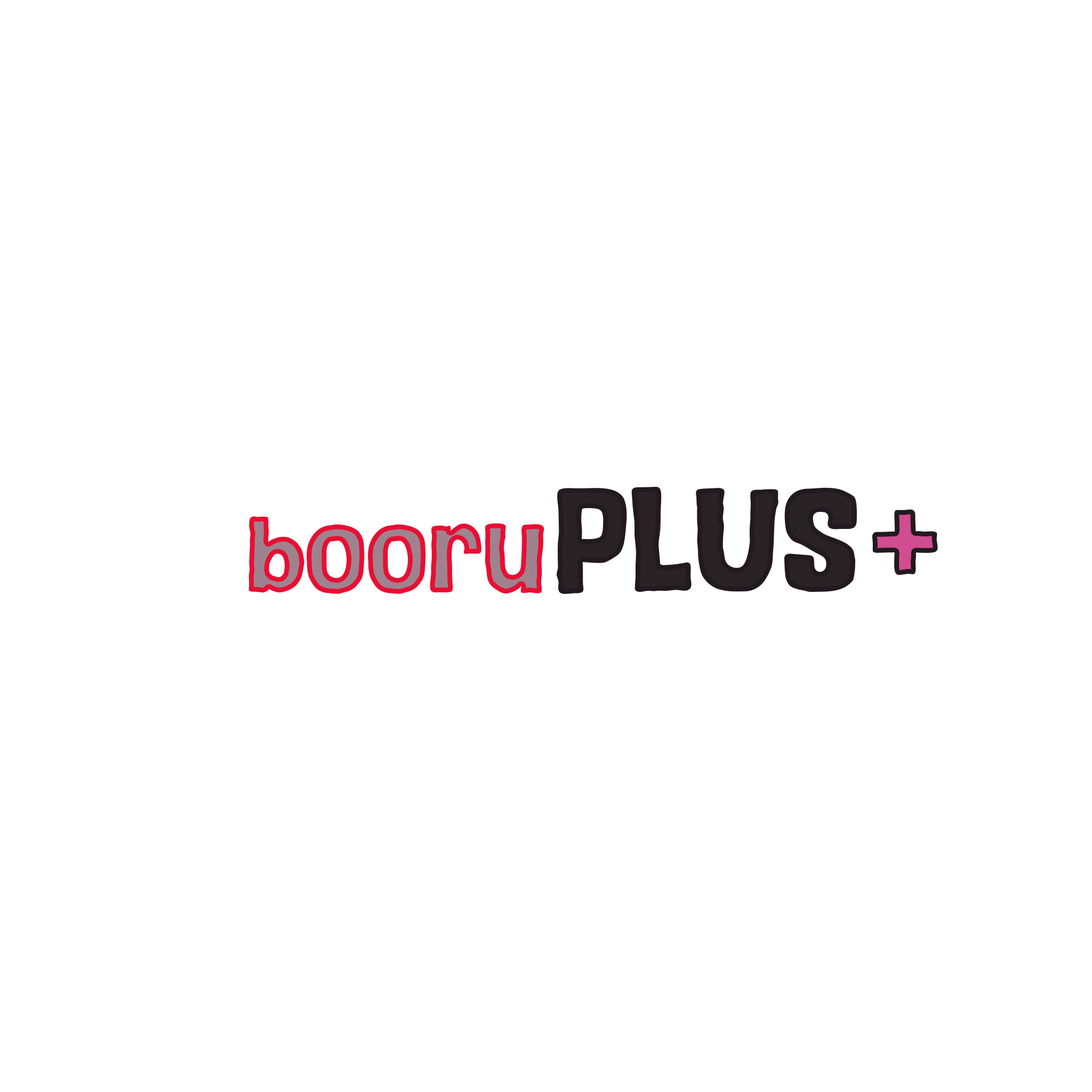
<style>
.page{position:relative;width:1092px;height:1092px;background:#ffffff}
.page>*{position:absolute;margin:0}
.t1{font:135.6px "TasteBread";color:#2a2326}
.t2{font:109.6px "TasteBread"}
.t3{font:99.6px "TasteBread"}
</style>
<div class="page">
<p class="t1" style="left:556px;top:487px;width:301px;height:107px">PLUS</p>
<p class="t2" style="left:872px;top:509px;width:66px;height:66px">+</p>
<p class="t3" style="left:248px;top:516px;width:296px;height:78px">booru</p>
</div>
